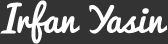
<style>
.page{position:relative;width:168px;height:44px;background:#333333}
.page>*{position:absolute;margin:0}
.t1{font:36px "Pacifico-Regular";color:#ffffff}
</style>
<div class="page">
<p class="t1" style="left:0px;top:0px;width:168px;height:44px">Irfan Yasin</p>
</div>
